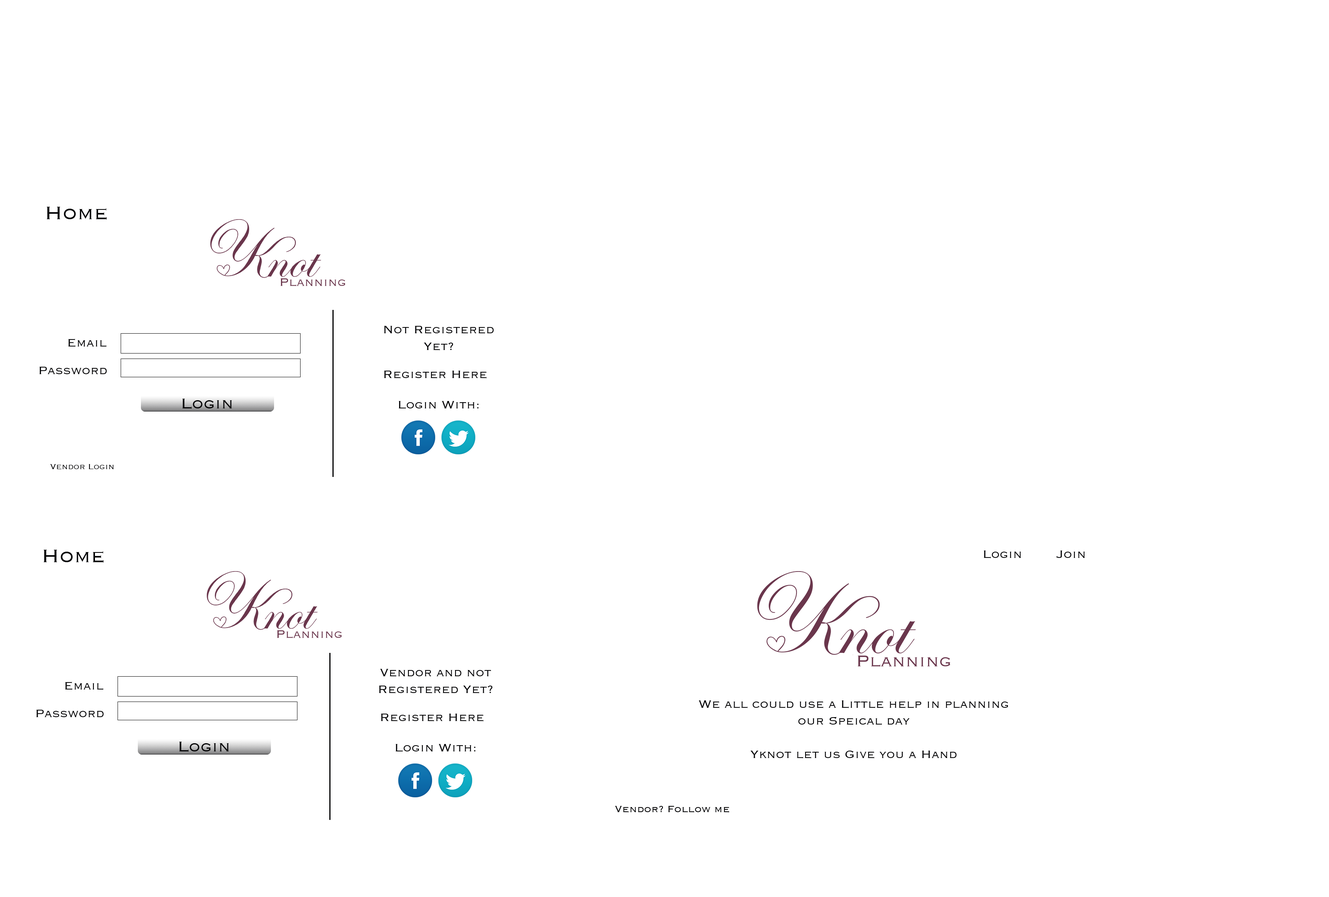
<style>
.page{position:relative;width:1329px;height:897px;background:#ffffff}
.page>*{position:absolute;margin:0}
.t1{font:23.4px "Copperplate-Light";color:#000002}
.t2{font:14px "Copperplate-Light";color:#000002}
.t3{font:18.7px "Copperplate-Light";color:#000002}
.t4{font:9.3px "Copperplate-Light";color:#000002}
.t5{font:11.7px "Copperplate-Light";color:#000002}
</style>
<div class="page">
<p class="t1" style="left:47px;top:207px;width:60px;height:13px">Home</p>
<p class="t2" style="left:384px;top:326px;width:110px;height:24px;text-align:center">Not Registered Yet?</p>
<p class="t2" style="left:68px;top:339px;width:39px;height:8px">Email</p>
<p class="t2" style="left:39px;top:367px;width:68px;height:7px">Password</p>
<p class="t2" style="left:384px;top:371px;width:103px;height:7px">Register Here</p>
<p class="t3" style="left:182px;top:399px;width:50px;height:10px">Login</p>
<p class="t2" style="left:399px;top:401px;width:80px;height:8px">Login With:</p>
<p class="t4" style="left:50px;top:464px;width:64px;height:6px">Vendor Login</p>
<p class="t1" style="left:44px;top:550px;width:60px;height:13px">Home</p>
<p class="t2" style="left:984px;top:551px;width:101px;height:7px">Login        Join</p>
<p class="t2" style="left:379px;top:669px;width:114px;height:24px;text-align:center">Vendor and not<br>Registered Yet?</p>
<p class="t2" style="left:65px;top:682px;width:39px;height:8px">Email</p>
<p class="t2" style="left:699px;top:700px;width:309px;height:58px;text-align:center">We all could use a Little help in planning <br>our Speical day<br><br>Yknot let us Give you a Hand</p>
<p class="t2" style="left:36px;top:710px;width:68px;height:7px">Password</p>
<p class="t2" style="left:381px;top:714px;width:103px;height:7px">Register Here</p>
<p class="t3" style="left:179px;top:742px;width:50px;height:10px">Login</p>
<p class="t2" style="left:396px;top:744px;width:80px;height:8px">Login With:</p>
<p class="t5" style="left:615px;top:806px;width:114px;height:7px">Vendor? Follow me</p>
</div>
